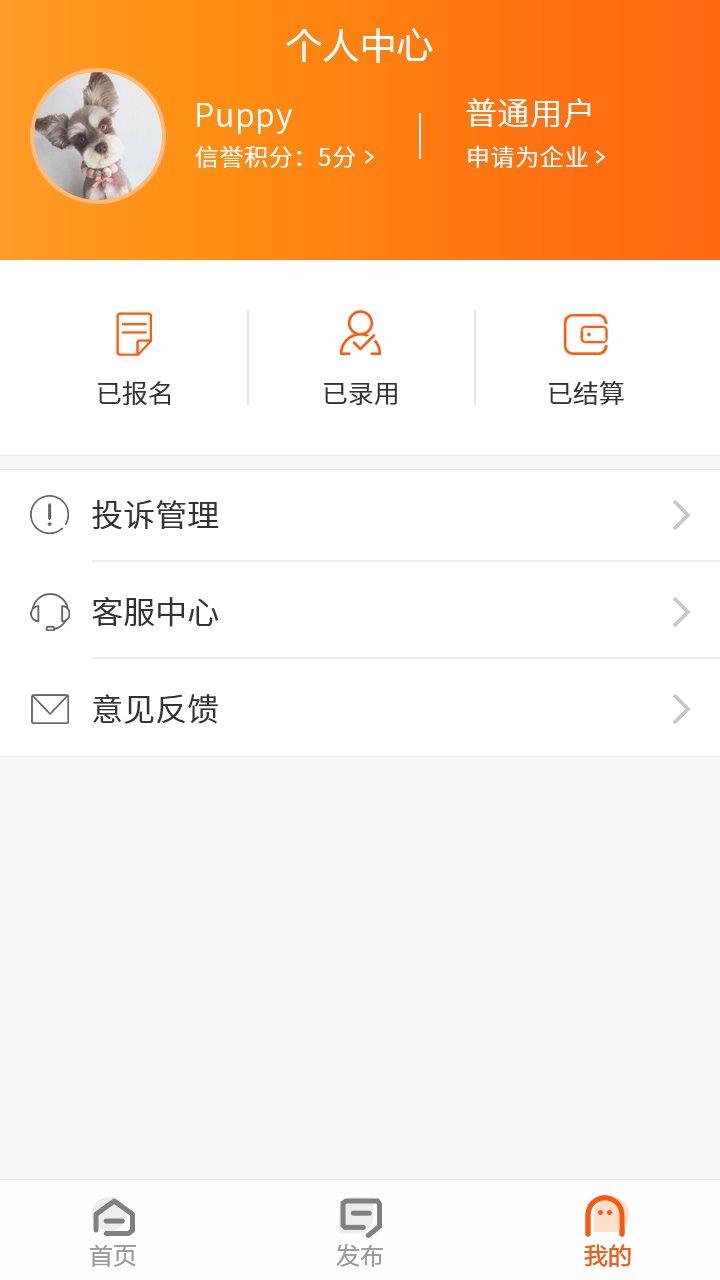
<style>
.page{position:relative;width:720px;height:1280px;background:#ffffff}
.page>*{position:absolute;margin:0}
.t1{font:36px "MicrosoftYaHei";letter-spacing:0.03em;color:#ffffff}
.t2{font:32px "NotoSansCJKsc-DemiLight";letter-spacing:0.03em;color:#ffffff}
.t3{font:24px "NotoSansCJKsc-DemiLight";letter-spacing:0.03em;color:#ffffff}
.t4{font:26px "NotoSansCJKsc-DemiLight";color:#333333;font-variant:small-caps}
.t5{font:32px "NotoSansCJKsc-DemiLight";color:#333333;font-variant:small-caps}
.t6{font:24px "FZLTHJW--GB1-0";color:#999999}
.t7{font:24px "FZLTHJW--GB1-0";color:#ff580a}
</style>
<div class="page">
<p class="t1" style="left:286px;top:28px;width:147px;height:35px">个人中心</p>
<p class="t2" style="left:466px;top:98px;width:125px;height:30px">普通用户</p>
<p class="t2" style="left:197px;top:103px;width:95px;height:31px">Puppy</p>
<p class="t3" style="left:195px;top:146px;width:160px;height:22px">信誉积分：5分</p>
<p class="t3" style="left:468px;top:145px;width:120px;height:23px">申请为企业</p>
<p class="t4" style="left:98px;top:381px;width:72px;height:24px">已报名</p>
<p class="t4" style="left:324px;top:383px;width:73px;height:22px">已录用</p>
<p class="t4" style="left:549px;top:381px;width:75px;height:24px">已结算</p>
<p class="t5" style="left:92px;top:499px;width:127px;height:31px">投诉管理</p>
<p class="t5" style="left:92px;top:596px;width:126px;height:31px">客服中心</p>
<p class="t5" style="left:93px;top:694px;width:125px;height:30px">意见反馈</p>
<p class="t6" style="left:90px;top:1244px;width:46px;height:23px">首页</p>
<p class="t6" style="left:336px;top:1244px;width:47px;height:23px">发布</p>
<p class="t7" style="left:584px;top:1244px;width:47px;height:23px">我的</p>
<p class="t7" style="left:584px;top:1244px;width:47px;height:23px">我的</p>
</div>
